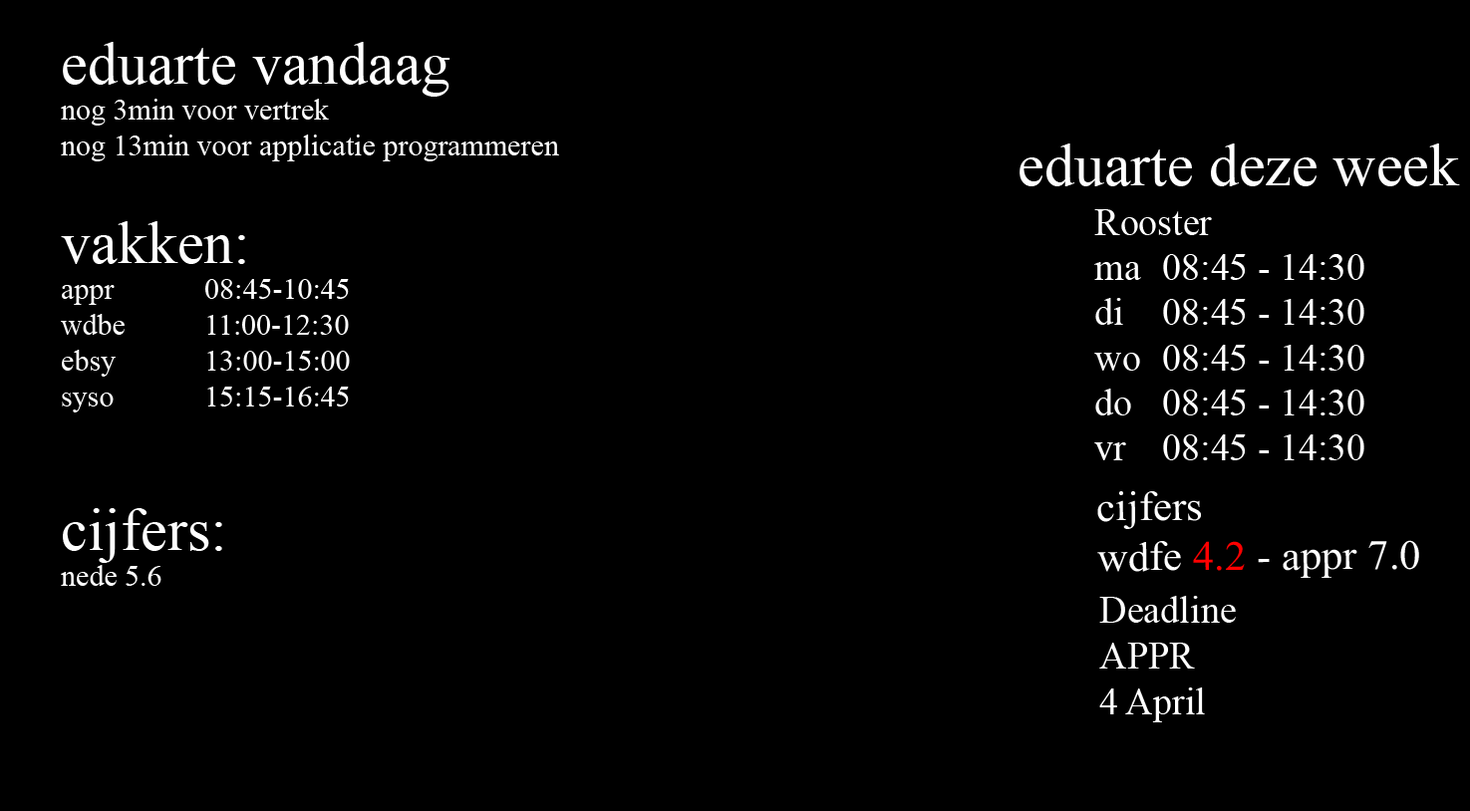
<style>
.page{position:relative;width:1470px;height:811px;background:#000000}
.page>*{position:absolute;margin:0}
.t1{font:29.9px "TimesNewRomanPSMT";color:#ffffff}
.t2{font:59.8px "TimesNewRomanPSMT";color:#ffffff}
.t3{font:37.6px "TimesNewRomanPSMT";color:#ffffff}
.t4{font:41.7px "TimesNewRomanPSMT";color:#ffffff}
.t5{font:41.7px "TimesNewRomanPSMT";color:#ff0000}
.t6{font:38px "TimesNewRomanPSMT";color:#ffffff}
</style>
<div class="page">
<p class="t1" style="left:61px;top:42px;width:498px;height:544px"><span class="t2">eduarte vandaag<br></span>nog 3min voor vertrek<br>nog 13min voor applicatie programmeren<br><br><span class="t2">vakken:<br></span>appr    08:45-10:45<br>wdbe   11:00-12:30<br>ebsy   13:00-15:00<br>syso   15:15-16:45<br><span class="t2"><br>cijfers:<br></span>nede 5.6</p>
<p class="t2" style="left:1019px;top:144px;width:441px;height:42px">eduarte deze week</p>
<p class="t3" style="left:1094px;top:209px;width:270px;height:251px">Rooster<br>ma 08:45 - 14:30<br>di  08:45 - 14:30<br>wo 08:45 - 14:30<br>do  08:45 - 14:30<br>vr  08:45 - 14:30</p>
<p class="t4" style="left:1097px;top:491px;width:322px;height:87px">cijfers<br>wdfe<span class="t5"> 4.2 </span>- appr 7.0</p>
<p class="t6" style="left:1099px;top:596px;width:137px;height:127px">Deadline<br>APPR<br>4 April</p>
</div>
